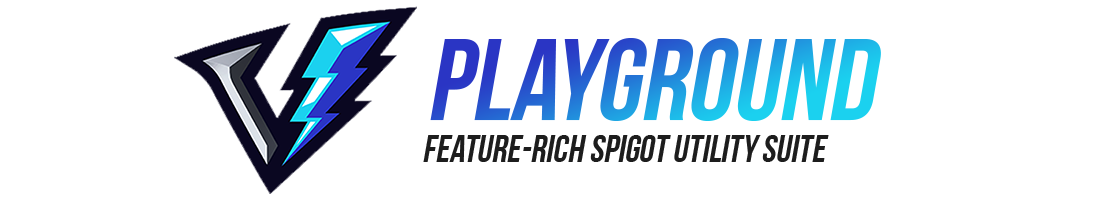
<style>
.page{position:relative;width:1100px;height:200px;background:#ffffff}
.page>*{position:absolute;margin:0}
.t1{font:115.2px "BebasNeue-Bold";font-style:italic}
.t2{font:37.4px "BebasNeue-Bold";color:#1d1d1d;font-style:italic}
</style>
<div class="page">
<p class="t1" style="left:430px;top:38px;width:451px;height:83px">Playground</p>
<p class="t2" style="left:423px;top:135px;width:406px;height:27px">Feature-rich Spigot utility suite</p>
</div>
